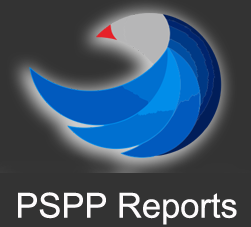
<style>
.page{position:relative;width:251px;height:227px;background:#333333}
.page>*{position:absolute;margin:0}
.t1{font:34.5px "ArialMT";color:#fdfbfc}
</style>
<div class="page">
<p class="t1" style="left:18px;top:192px;width:219px;height:33px">PSPP Reports</p>
</div>
